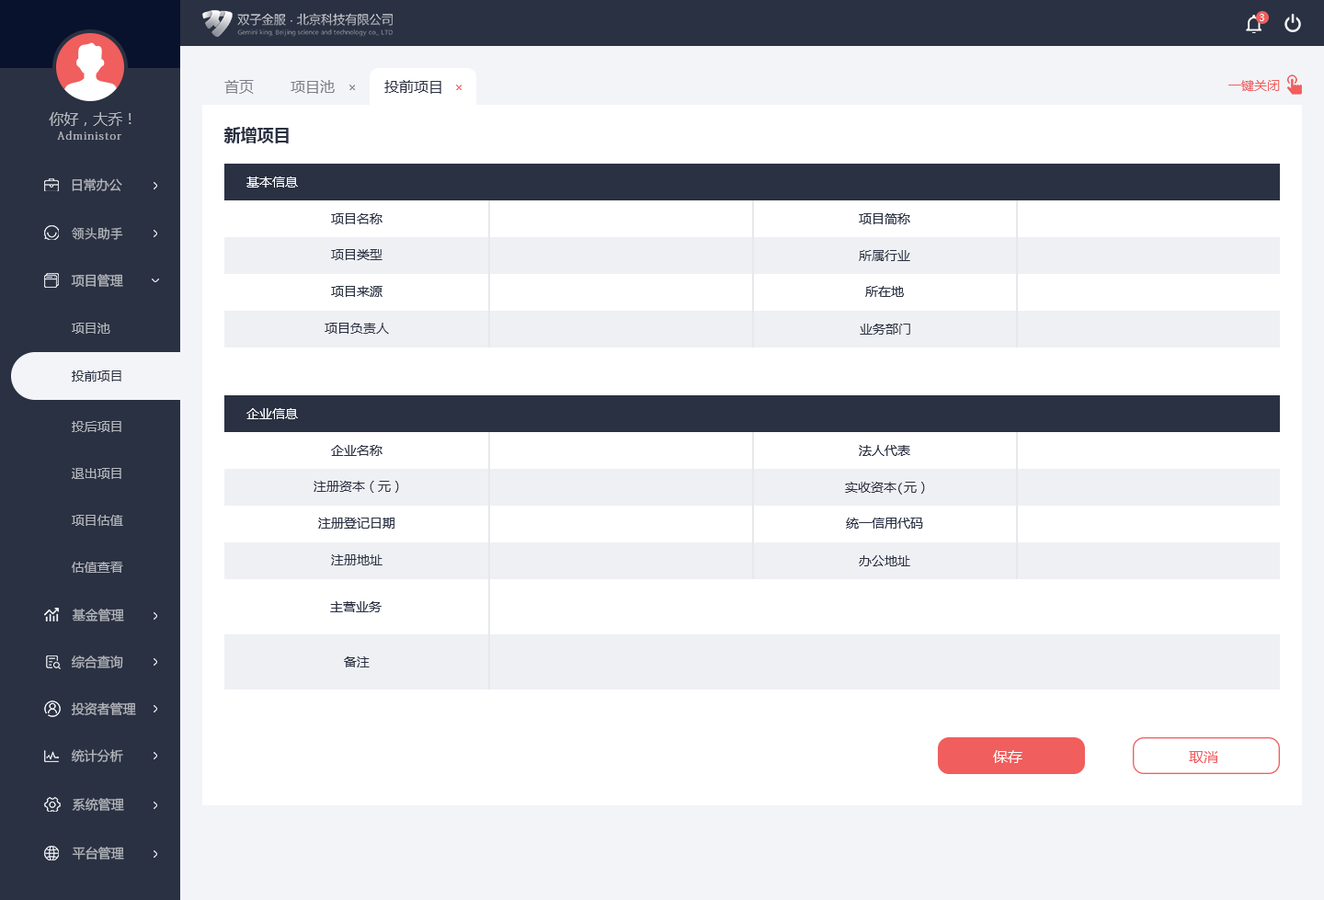
<style>
.page{position:relative;width:1324px;height:900px;background:#ffffff}
.page>*{position:absolute;margin:0}
.t1{font:9.2px "MicrosoftYaHeiUI";color:#ffffff}
.t2{font:14.7px "MicrosoftYaHeiMono";color:#7b7f88}
.t3{font:14.7px "MicrosoftYaHeiMono";color:#2a3142}
.t4{font:12.9px "MicrosoftYaHeiMono";color:#f05e5e}
.t5{font:14.7px "MicrosoftYaHeiMono";color:#b4b7bd}
.t6{font:11px "AdobeFangsongStd-Regular";letter-spacing:0.1em;color:#b4b7bd}
.t7{font:16.6px "MicrosoftYaHeiUI-Bold";color:#2a3142}
.t8{font:12.9px "MicrosoftYaHeiUI";color:#b4b7bd}
.t9{font:12.9px "MicrosoftYaHeiMono";color:#ffffff}
.t10{font:12.9px "MicrosoftYaHeiMono";color:#2a3142}
.t11{font:12.9px "PingFang-SC-Medium";color:#b4b7bd}
.t12{font:12.9px "MicrosoftYaHeiUI";color:#2a3142}
.t13{font:14.7px "MicrosoftYaHeiUI";color:#ffffff}
.t14{font:14.7px "MicrosoftYaHeiUI";color:#f05e5e}
</style>
<div class="page">
<p class="t1" style="left:1260px;top:14px;width:5px;height:7px">3</p>
<p class="t2" style="left:224px;top:80px;width:30px;height:14px">首页</p>
<p class="t2" style="left:291px;top:80px;width:44px;height:14px">项目池</p>
<p class="t3" style="left:384px;top:80px;width:57px;height:14px">投前项目</p>
<p class="t4" style="left:1229px;top:80px;width:51px;height:11px">一键关闭</p>
<p class="t5" style="left:49px;top:112px;width:83px;height:14px">你好，大乔！</p>
<p class="t6" style="left:57px;top:131px;width:64px;height:9px">Administor</p>
<p class="t7" style="left:223px;top:127px;width:66px;height:16px">新增项目</p>
<p class="t8" style="left:72px;top:178px;width:50px;height:13px">日常办公</p>
<p class="t9" style="left:246px;top:177px;width:52px;height:11px">基本信息</p>
<p class="t10" style="left:331px;top:213px;width:52px;height:11px">项目名称</p>
<p class="t10" style="left:859px;top:213px;width:51px;height:11px">项目简称</p>
<p class="t11" style="left:72px;top:227px;width:51px;height:13px">领头助手</p>
<p class="t10" style="left:331px;top:249px;width:52px;height:11px">项目类型</p>
<p class="t10" style="left:859px;top:250px;width:51px;height:11px">所属行业</p>
<p class="t8" style="left:71px;top:274px;width:52px;height:14px">项目管理</p>
<p class="t10" style="left:331px;top:286px;width:52px;height:11px">项目来源</p>
<p class="t10" style="left:865px;top:286px;width:39px;height:11px">所在地</p>
<p class="t8" style="left:72px;top:323px;width:38px;height:11px">项目池</p>
<p class="t10" style="left:325px;top:323px;width:64px;height:11px">项目负责人</p>
<p class="t10" style="left:860px;top:324px;width:50px;height:11px">业务部门</p>
<p class="t12" style="left:72px;top:371px;width:49px;height:11px">投前项目</p>
<p class="t9" style="left:246px;top:408px;width:52px;height:11px">企业信息</p>
<p class="t8" style="left:72px;top:421px;width:49px;height:11px">投后项目</p>
<p class="t10" style="left:331px;top:445px;width:52px;height:11px">企业名称</p>
<p class="t10" style="left:859px;top:445px;width:51px;height:11px">法人代表</p>
<p class="t8" style="left:72px;top:468px;width:49px;height:11px">退出项目</p>
<p class="t10" style="left:314px;top:481px;width:85px;height:12px">注册资本（元）</p>
<p class="t10" style="left:845px;top:482px;width:80px;height:13px">实收资本(元）</p>
<p class="t8" style="left:72px;top:515px;width:51px;height:11px">项目估值</p>
<p class="t10" style="left:318px;top:518px;width:77px;height:11px">注册登记日期</p>
<p class="t10" style="left:846px;top:518px;width:77px;height:11px">统一信用代码</p>
<p class="t10" style="left:331px;top:555px;width:52px;height:11px">注册地址</p>
<p class="t10" style="left:859px;top:555px;width:51px;height:12px">办公地址</p>
<p class="t8" style="left:72px;top:562px;width:51px;height:11px">估值查看</p>
<p class="t10" style="left:330px;top:601px;width:52px;height:12px">主营业务</p>
<p class="t8" style="left:72px;top:609px;width:52px;height:13px">基金管理</p>
<p class="t8" style="left:71px;top:656px;width:52px;height:14px">综合查询</p>
<p class="t10" style="left:344px;top:657px;width:26px;height:11px">备注</p>
<p class="t8" style="left:71px;top:703px;width:65px;height:13px">投资者管理</p>
<p class="t8" style="left:71px;top:750px;width:52px;height:12px">统计分析</p>
<p class="t13" style="left:993px;top:750px;width:30px;height:13px">保存</p>
<p class="t14" style="left:1189px;top:751px;width:30px;height:12px">取消</p>
<p class="t8" style="left:72px;top:798px;width:52px;height:13px">系统管理</p>
<p class="t8" style="left:72px;top:847px;width:52px;height:13px">平台管理</p>
</div>
